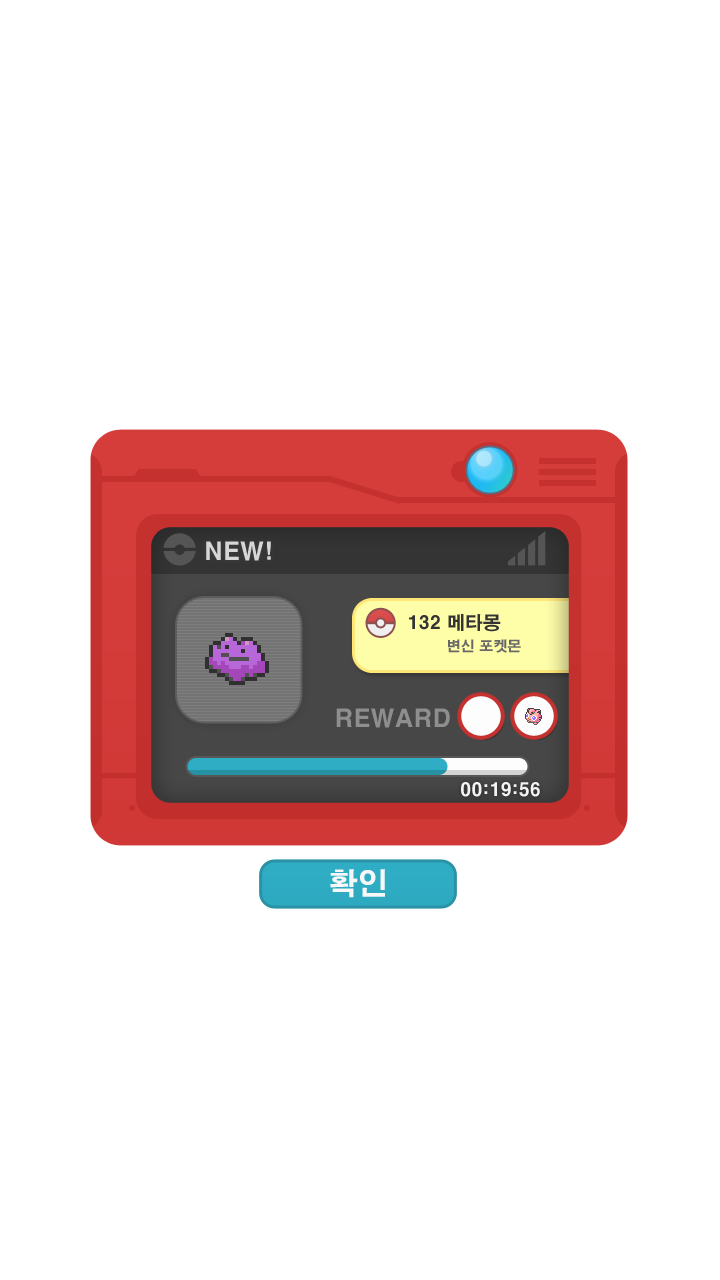
<style>
.page{position:relative;width:720px;height:1280px;background:#ffffff}
.page>*{position:absolute;margin:0}
.t1{font:24px "H2gtrE";color:#d7d7d7}
.t2{font:18px "H2gtrE";color:#343434}
.t3{font:14px "H2gtrE";color:#686868}
.t4{font:24px "H2gtrE";color:#8e8e8e}
.t5{font:18px "H2gtrE";color:#f3f3f3}
.t6{font:30px "H2gtrE";color:#f7f7f7}
</style>
<div class="page">
<p class="t1" style="left:206px;top:541px;width:65px;height:20px">NEW!</p>
<p class="t2" style="left:409px;top:614px;width:92px;height:18px">132 메타몽</p>
<p class="t3" style="left:448px;top:639px;width:73px;height:14px">변신 포켓몬</p>
<p class="t4" style="left:336px;top:708px;width:114px;height:20px">REWARD</p>
<p class="t5" style="left:461px;top:782px;width:79px;height:15px">00:19:56</p>
<p class="t6" style="left:330px;top:869px;width:55px;height:29px">확인</p>
</div>
